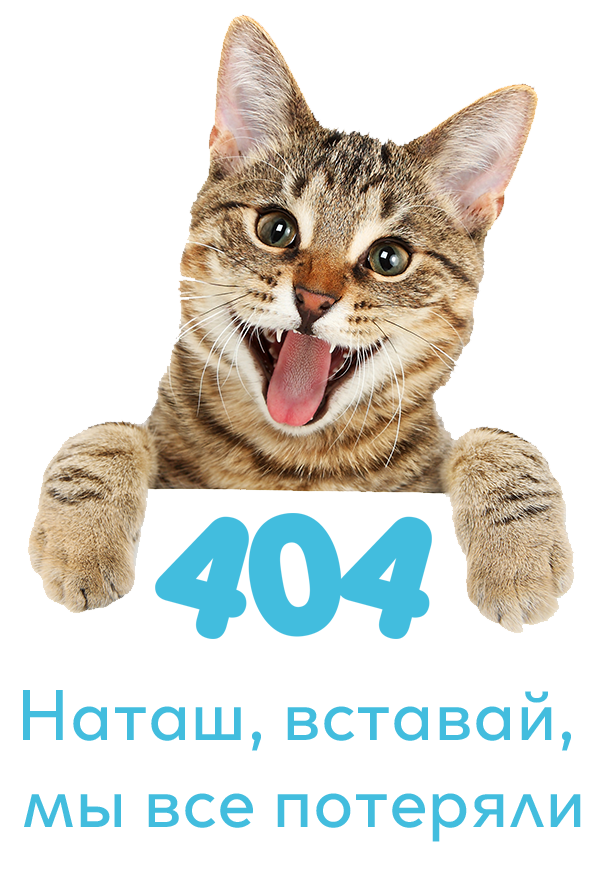
<style>
.page{position:relative;width:603px;height:870px;background:#ffffff}
.page>*{position:absolute;margin:0}
.t1{font:73px "TRYClother-Regular";color:#42bdde}
</style>
<div class="page">
<p class="t1" style="left:23px;top:690px;width:558px;height:152px;text-align:center">Наташ, вставай, <br>мы все потеряли</p>
</div>
